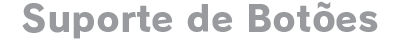
<style>
.page{position:relative;width:400px;height:40px;background:#ffffff}
.page>*{position:absolute;margin:0}
.t1{font:36px "RodinPro-EB";letter-spacing:0.003em;color:#989a9d}
</style>
<div class="page">
<p class="t1" style="left:22px;top:1px;width:356px;height:38px">Suporte de Botões</p>
</div>
